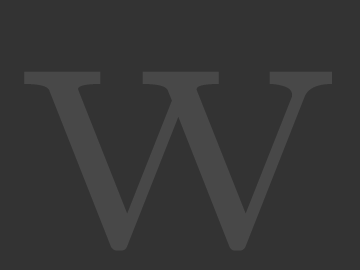
<style>
.page{position:relative;width:360px;height:270px;background:#333333}
.page>*{position:absolute;margin:0}
.t1{font:253.8px "Cmr5";color:#484848;text-transform:uppercase}
</style>
<div class="page">
<p class="t1" style="left:24px;top:71px;width:308px;height:180px">W</p>
</div>
